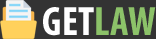
<style>
.page{position:relative;width:156px;height:39px;background:#333333}
.page>*{position:absolute;margin:0}
.t1{font:41px "MyriadPro-BoldCond";color:#ffffff}
.t2{font:41px "MyriadPro-BoldCond";color:#8cc269}
</style>
<div class="page">
<p class="t1" style="left:43px;top:7px;width:113px;height:29px">GET<span class="t2">LAW</span></p>
</div>
